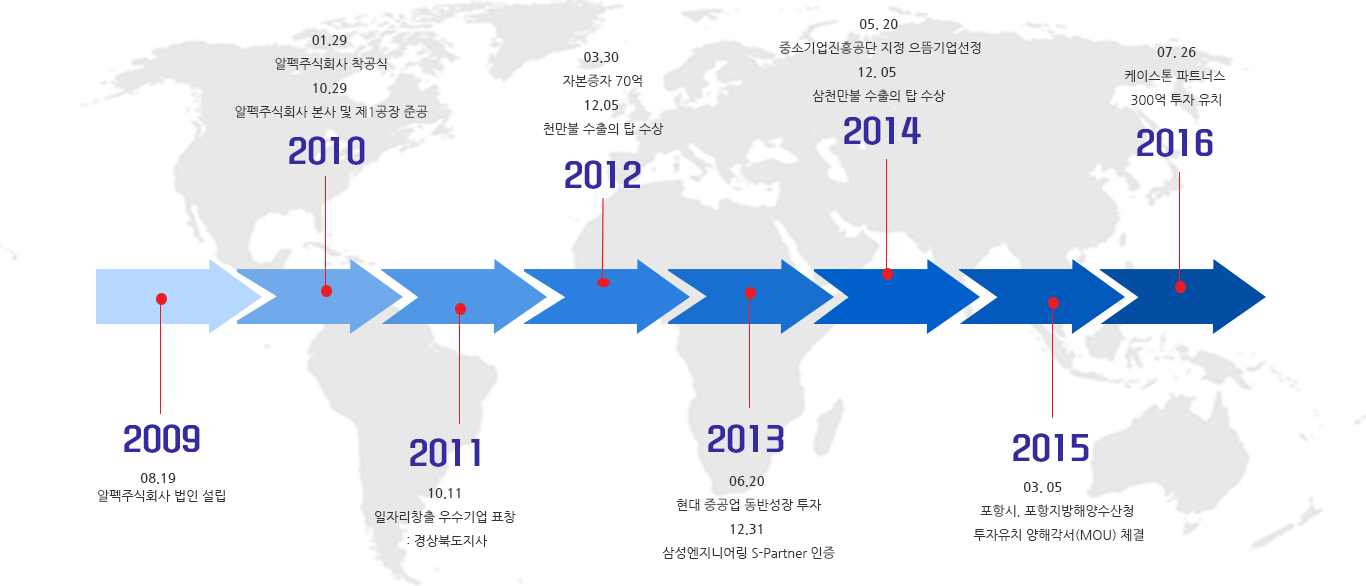
<style>
.page{position:relative;width:1366px;height:586px;background:#ffffff}
.page>*{position:absolute;margin:0}
.t1{font:13px/24px "NanumGothic";color:#333333}
.t2{font:13px/24px "NanumGothicBold";color:#333333}
.t3{font:30px "KoreanYNMYT-B";color:#352ba0}
.t4{font:13px/18px "NanumGothic";color:#333333}
.t5{font:13px/18px "NanumGothicBold";color:#333333}
</style>
<div class="page">
<p class="t1" style="left:779px;top:19px;width:202px;height:83px;text-align:center"><span class="t2">05. 20<br></span> 중소기업진흥공단 지정 으뜸기업선정<br><span class="t2">12. 05 <br></span>삼천만불 수출의 탑 수상</p>
<p class="t1" style="left:235px;top:35px;width:193px;height:83px;text-align:center"><span class="t2">01.29 <br></span>알펙주식회사 착공식<br><span class="t2">10.29 <br></span>알펙주식회사 본사 및 제1공장 준공</p>
<p class="t1" style="left:543px;top:52px;width:121px;height:83px;text-align:center"><span class="t2">03.30</span> <br>자본증자 70억<br><span class="t2">12.05 <br></span>천만불 수출의 탑 수상</p>
<p class="t1" style="left:1125px;top:47px;width:101px;height:59px;text-align:center"><span class="t2">07. 26<br></span>케이스톤 파트너스 <br>300억 투자 유치</p>
<p class="t3" style="left:844px;top:116px;width:77px;height:29px">2014</p>
<p class="t3" style="left:289px;top:136px;width:76px;height:29px">2010</p>
<p class="t3" style="left:1137px;top:128px;width:76px;height:29px">2016</p>
<p class="t3" style="left:565px;top:160px;width:76px;height:29px">2012</p>
<p class="t3" style="left:124px;top:424px;width:76px;height:29px">2009</p>
<p class="t3" style="left:708px;top:424px;width:76px;height:29px">2013</p>
<p class="t3" style="left:410px;top:438px;width:70px;height:29px">2011</p>
<p class="t3" style="left:1013px;top:433px;width:76px;height:29px">2015</p>
<p class="t4" style="left:98px;top:473px;width:127px;height:29px;text-align:center"><span class="t5">08.19  <br></span>알펙주식회사 법인 설립</p>
<p class="t1" style="left:662px;top:476px;width:173px;height:83px;text-align:center"><span class="t2">06.20</span> <br>현대 중공업 동반성장 투자<br><span class="t2">12.31 <br></span>삼성엔지니어링 S-Partner 인증</p>
<p class="t1" style="left:973px;top:482px;width:171px;height:59px;text-align:center"><span class="t2">03. 05</span> <br>포항시, 포항지방해양수산청 <br>투자유치 양해각서(MOU) 체결</p>
<p class="t1" style="left:375px;top:488px;width:141px;height:59px;text-align:center"><span class="t2">10.11</span> <br>일자리창출 우수기업 표창 <br>: 경상북도지사</p>
</div>
